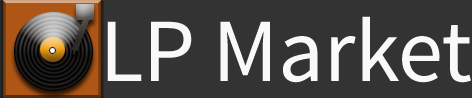
<style>
.page{position:relative;width:472px;height:98px;background:#333333}
.page>*{position:absolute;margin:0}
.t1{font:90px "SourceSansPro-Regular";color:#f9f9f9}
</style>
<div class="page">
<p class="t1" style="left:107px;top:16px;width:364px;height:67px">LP Market</p>
</div>
